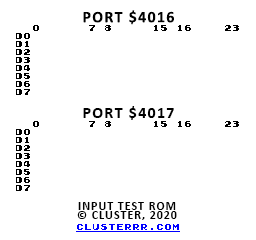
<style>
.page{position:relative;width:256px;height:240px;background:#ffffff}
.page>*{position:absolute;margin:0}
.t1{font:16px "Calibri-Bold";letter-spacing:0.08em;color:#000000}
.t2{font:12px/9px "Calibri-Bold";letter-spacing:0.08em;color:#000000}
.t3{font:8px "GamegirlClassic";color:#0000ff}
</style>
<div class="page">
<p class="t1" style="left:83px;top:10px;width:91px;height:15px">PORT $4016</p>
<p class="t1" style="left:83px;top:106px;width:91px;height:14px">PORT $4017</p>
<p class="t2" style="left:77px;top:202px;width:100px;height:18px;text-align:center">INPUT TEST ROM<br>© CLUSTER, 2020</p>
<p class="t3" style="left:77px;top:224px;width:102px;height:6px">CLUSTERRR.COM</p>
</div>
